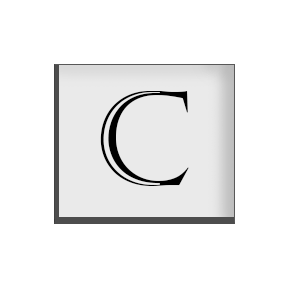
<style>
.page{position:relative;width:288px;height:288px;background:#ffffff}
.page>*{position:absolute;margin:0}
.t1{font:130px "Castellar";color:#000000}
</style>
<div class="page">
<p class="t1" style="left:100px;top:91px;width:89px;height:95px">C</p>
</div>
